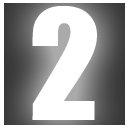
<style>
.page{position:relative;width:128px;height:128px;background:#ffffff}
.page>*{position:absolute;margin:0}
.t1{font:142.1px "Impact";color:#ffffff}
</style>
<div class="page">
<p class="t1" style="left:32px;top:6px;width:65px;height:114px">2</p>
</div>
